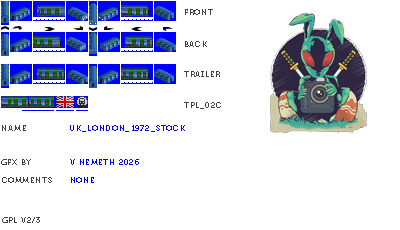
<style>
.page{position:relative;width:400px;height:230px;background:#ffffff}
.page>*{position:absolute;margin:0}
.t1{font:8px "Museo700-Regular";letter-spacing:0.075em;color:#404040;text-transform:uppercase}
.t2{font:8px "Museo700-Regular";letter-spacing:0.075em;color:#0000ff;text-transform:uppercase}
</style>
<div class="page">
<p class="t1" style="left:185px;top:9px;width:28px;height:6px">front</p>
<p class="t1" style="left:185px;top:41px;width:22px;height:6px">back</p>
<p class="t1" style="left:184px;top:71px;width:36px;height:6px">trailer</p>
<p class="t1" style="left:184px;top:102px;width:37px;height:7px">tpl_02c</p>
<p class="t1" style="left:2px;top:125px;width:24px;height:6px">name</p>
<p class="t2" style="left:70px;top:125px;width:115px;height:7px">UK_London_1972_Stock</p>
<p class="t1" style="left:1px;top:159px;width:30px;height:6px">gfx by</p>
<p class="t2" style="left:70px;top:159px;width:69px;height:6px">v nemeth 2026</p>
<p class="t1" style="left:2px;top:177px;width:50px;height:6px">comments</p>
<p class="t2" style="left:71px;top:177px;width:23px;height:6px">none</p>
<p class="t1" style="left:2px;top:217px;width:38px;height:6px">gpl v2/3</p>
</div>
